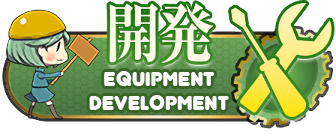
<style>
.page{position:relative;width:336px;height:135px;background:#ffffff}
.page>*{position:absolute;margin:0}
.t1{font:24px/24px "Junegull";color:#ffffff}
</style>
<div class="page">
<p class="t1" style="left:89px;top:71px;width:140px;height:39px;text-align:center">EQUIPMENT<br>DEVELOPMENT</p>
</div>
